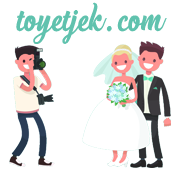
<style>
.page{position:relative;width:178px;height:176px;background:#ffffff}
.page>*{position:absolute;margin:0}
.t1{font:33.3px "Handycheera";color:#60c2ad;scale:0.94 1}
</style>
<div class="page">
<p class="t1" style="left:16px;top:2px;width:151px;height:42px">toyetjek.com</p>
</div>
